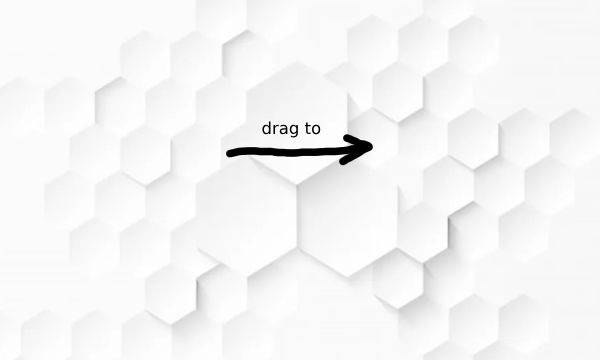
<style>
.page{position:relative;width:600px;height:360px}
.page>*{position:absolute;margin:0}
.t1{font:16.5px "DejaVuSans";color:#000000}
</style>
<div class="page">
<p class="t1" style="left:262px;top:121px;width:59px;height:17px">drag to</p>
</div>
